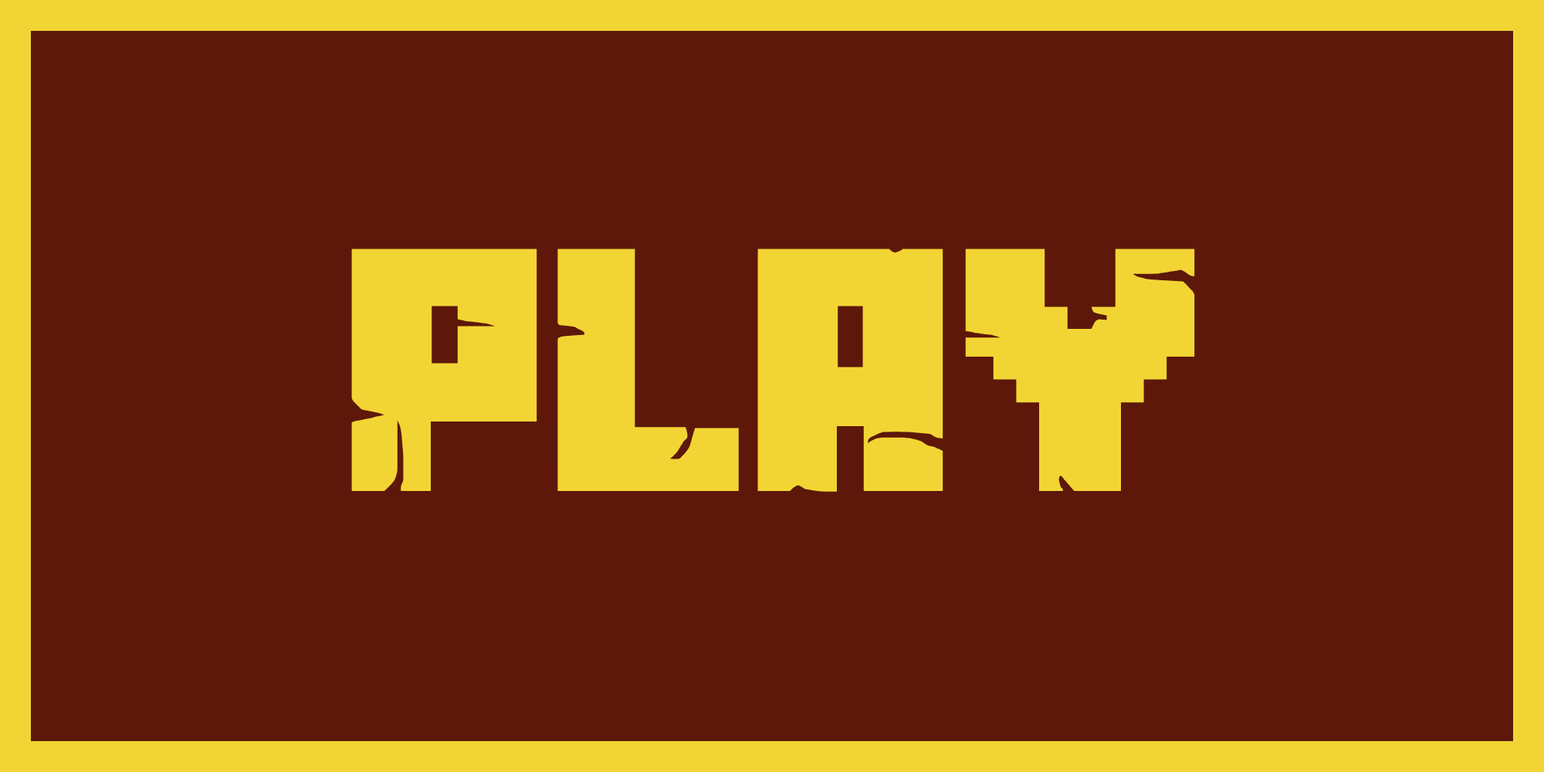
<style>
.page{position:relative;width:1544px;height:772px;background:#5d1809}
.page>*{position:absolute;margin:0}
.t1{font:308.9px "MinecrafterAlt";color:#f2d534}
</style>
<div class="page">
<p class="t1" style="left:351px;top:249px;width:844px;height:243px">PLAY</p>
</div>
